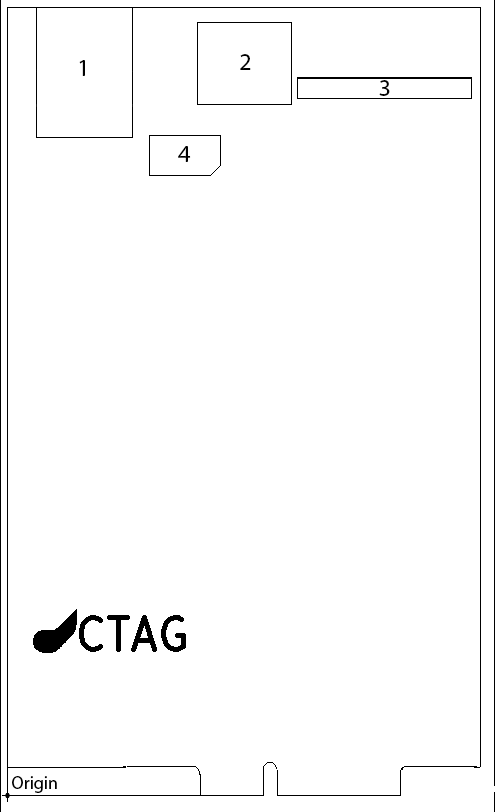
<style>
.page{position:relative;width:495px;height:812px;background:#ffffff}
.page>*{position:absolute;margin:0}
.t1{font:24px "MyriadPro-Regular";color:#000000}
.t2{font:18px "MyriadPro-Regular";color:#000000}
</style>
<div class="page">
<p class="t1" style="left:240px;top:54px;width:11px;height:16px">2</p>
<p class="t1" style="left:79px;top:60px;width:6px;height:16px">1</p>
<p class="t1" style="left:379px;top:80px;width:11px;height:16px">3</p>
<p class="t1" style="left:178px;top:146px;width:13px;height:16px">4</p>
<p class="t2" style="left:12px;top:776px;width:45px;height:17px">Origin</p>
</div>
